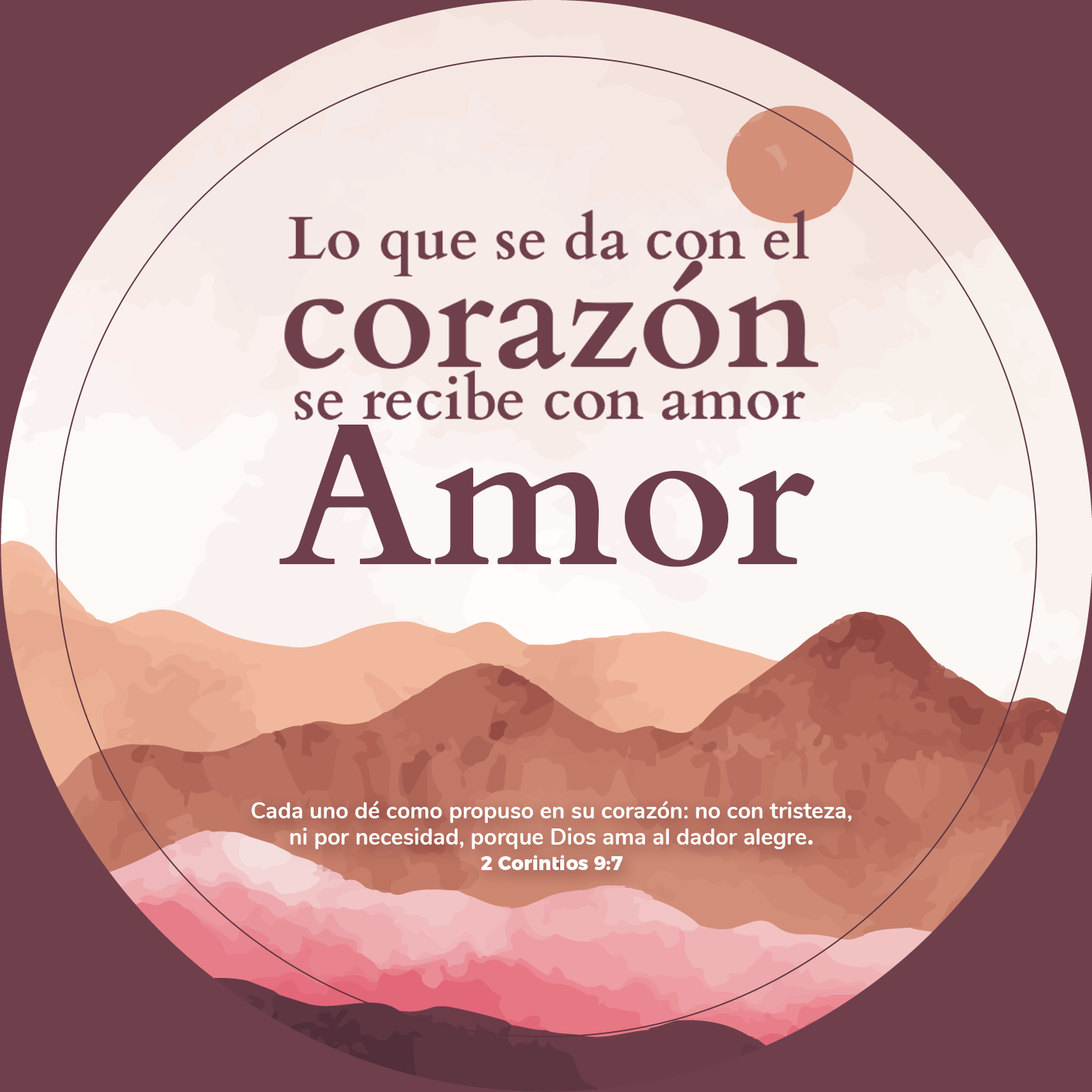
<style>
.page{position:relative;width:1092px;height:1092px;background:#6f3f4c}
.page>*{position:absolute;margin:0}
.t1{font:202.3px "Cardo-Bold";color:#6f3f4c}
.t2{font:22.5px/25.7px "Nunito-Bold";color:#ffffff}
.t3{font:28.9px/25.7px "Nunito-Bold";color:#ffffff}
.t4{font:19.3px/25.7px "MontserratAlternates-ExtraBold";color:#ffffff}
</style>
<div class="page">
<p class="t1" style="left:279px;top:424px;width:536px;height:143px">Amor</p>
<p class="t2" style="left:251px;top:801px;width:601px;height:69px;text-align:center">Cada uno dé como propuso en su corazón: no con tristeza,<br>ni por necesidad, porque Dios ama al dador alegre<span class="t3">.<br></span><span class="t4">2 Corintios 9:7</span></p>
</div>
